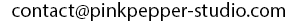
<style>
.page{position:relative;width:300px;height:26px;background:#ffffff}
.page>*{position:absolute;margin:0}
.t1{font:20.2px "MyriadPro-Regular";color:#000000}
</style>
<div class="page">
<p class="t1" style="left:12px;top:2px;width:273px;height:19px">contact@pinkpepper-studio.com</p>
</div>
